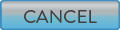
<style>
.page{position:relative;width:120px;height:30px}
.page>*{position:absolute;margin:0}
.t1{font:18.8px "BrandonGrotesque-Regular";color:#404041}
</style>
<div class="page">
<p class="t1" style="left:24px;top:10px;width:73px;height:13px">CANCEL</p>
</div>
